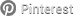
<style>
.page{position:relative;width:79px;height:16px;background:#ffffff}
.page>*{position:absolute;margin:0}
.t1{font:12px "Roboto-Regular";letter-spacing:0.04em;color:#d8d8d8}
</style>
<div class="page">
<p class="t1" style="left:21px;top:3px;width:53px;height:10px">Pinterest</p>
</div>
